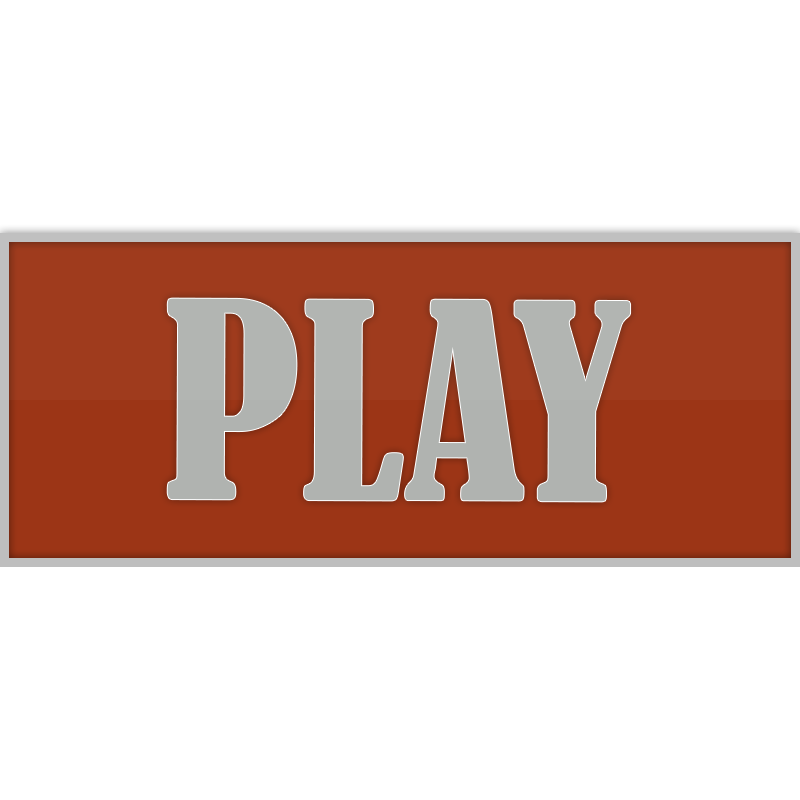
<style>
.page{position:relative;width:800px;height:800px;background:#ffffff}
.page>*{position:absolute;margin:0}
.t1{font:254.3px "BernardMT-Condensed";color:#b0b3b0}
</style>
<div class="page">
<p class="t1" style="left:167px;top:298px;width:464px;height:204px">PLAY</p>
</div>
